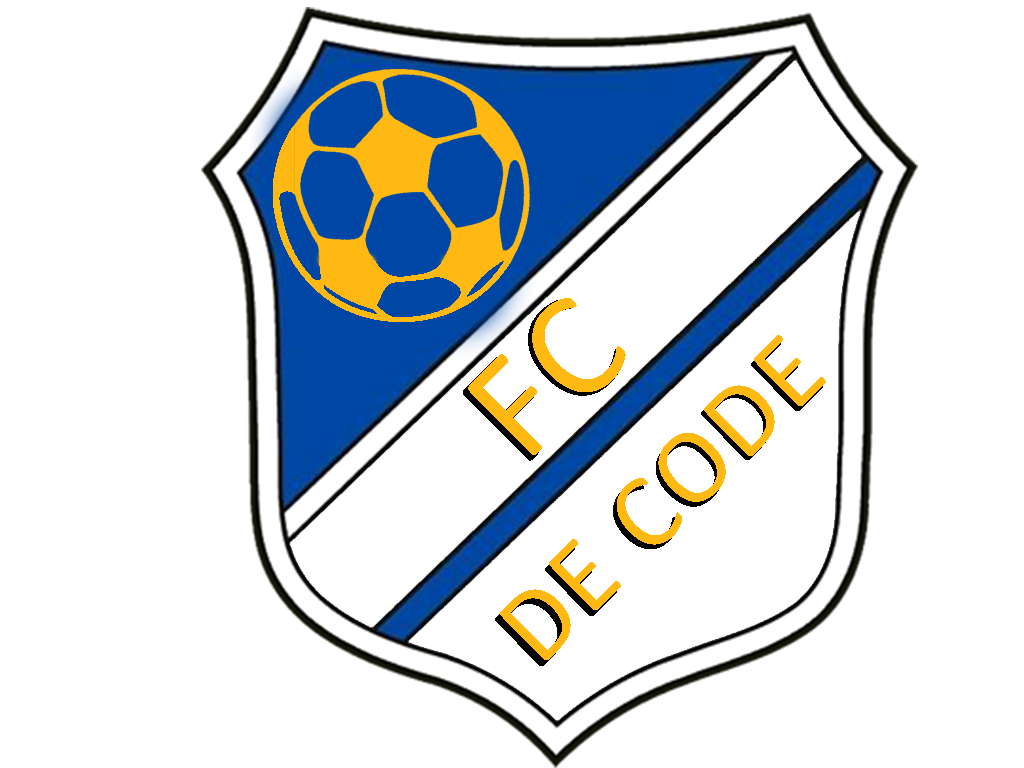
<style>
.page{position:relative;width:1024px;height:768px;background:#ffffff}
.page>*{position:absolute;margin:0}
.t1{font:156px "Calibri";letter-spacing:0.04em;color:#ffb912;text-transform:uppercase}
.t2{font:152px "Calibri";letter-spacing:0.04em;color:#ffb912;text-transform:uppercase}
.t3{font:107.2px "Calibri";letter-spacing:0.04em;text-transform:uppercase}
.t4{font:106.4px "Calibri";letter-spacing:0.04em;color:#ffb912;text-transform:uppercase}
</style>
<div class="page">
<p class="t1" style="left:463px;top:299px;width:161px;height:162px;rotate:-45deg">FC</p>
<p class="t2" style="left:468px;top:298px;width:158px;height:157px;rotate:-45deg">FC</p>
<p class="t3" style="left:495px;top:339px;width:328px;height:327px;rotate:-45deg">De Code</p>
<p class="t4" style="left:500px;top:335px;width:326px;height:325px;rotate:-45deg">De Code</p>
</div>
